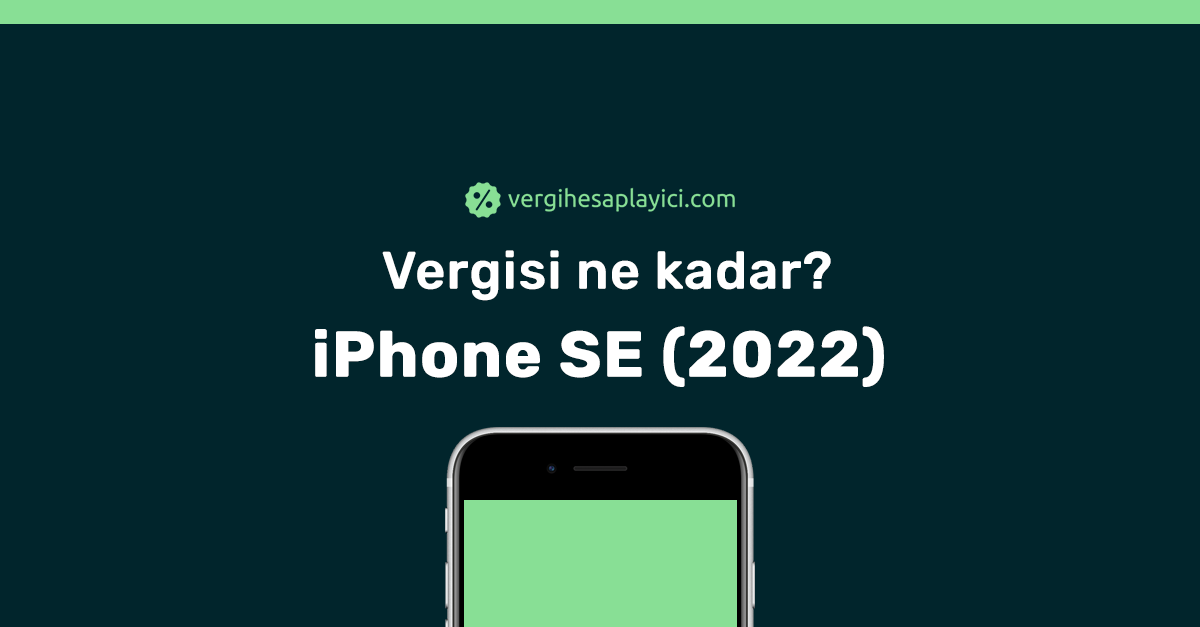
<style>
.page{position:relative;width:1200px;height:627px;background:#01252c}
.page>*{position:absolute;margin:0}
.t1{font:52px/88px "Rubik-Medium";color:#ffffff;font-weight:bold}
.t2{font:64px/88px "Rubik-Bold";color:#ffffff;font-weight:bold}
</style>
<div class="page">
<p class="t1" style="left:315px;top:250px;width:569px;height:137px;text-align:center">Vergisi ne kadar?<br><span class="t2">iPhone SE (2022)</span></p>
</div>
